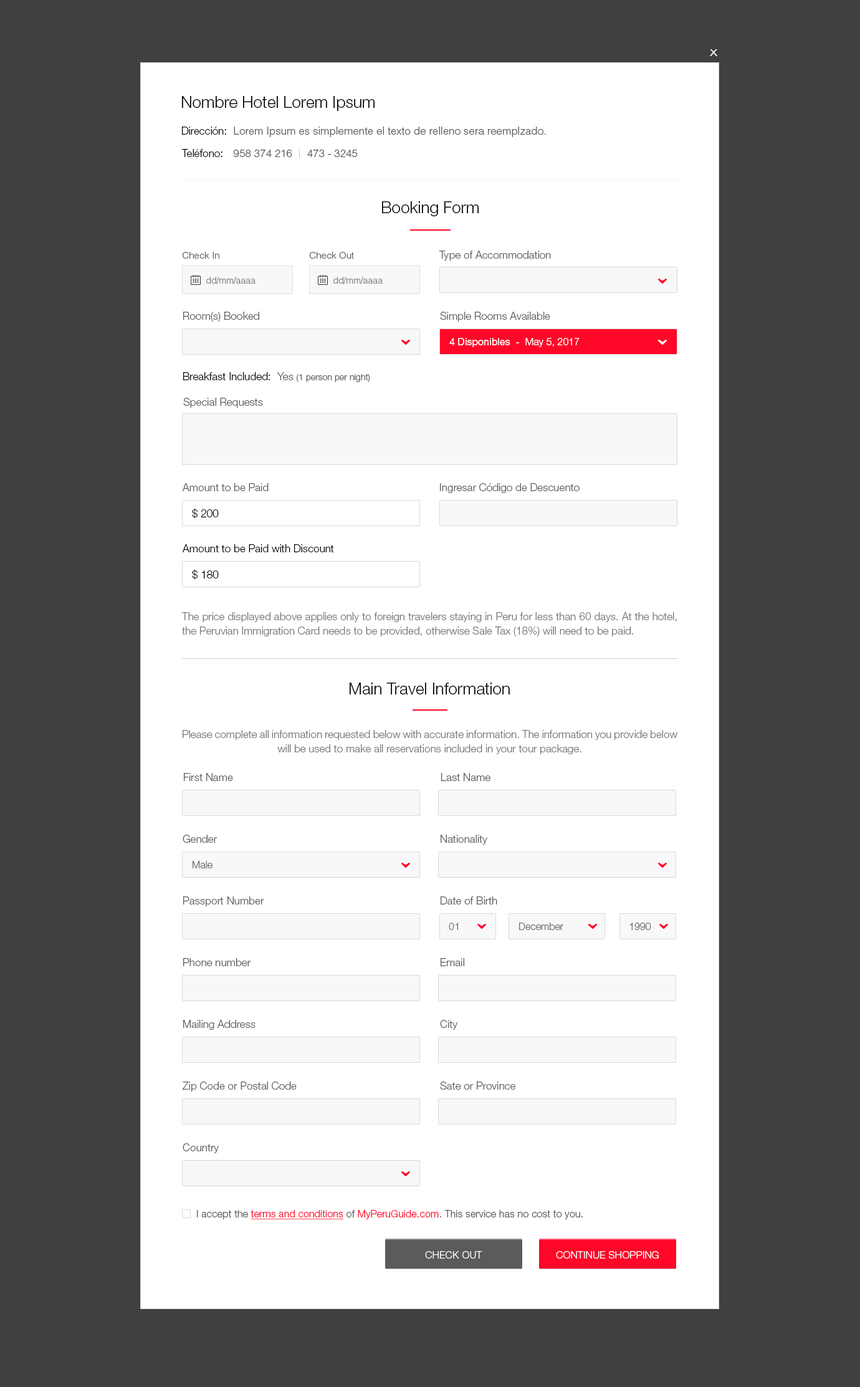
<style>
.page{position:relative;width:860px;height:1387px;background:#ffffff}
.page>*{position:absolute;margin:0}
.t1{font:13.1px "HelveticaNeueLTStd-Lt";color:#ffffff;scale:1.18 1}
.t2{font:16.2px "HelveticaNeueLTStd-Lt";color:#000000}
.t3{font:10.6px "HelveticaNeueLTStd-Lt";color:#000000}
.t4{font:10.6px "HelveticaLTStd-Light";color:#5b5b5b}
.t5{font:9.3px "HelveticaLTStd-Light";color:#5b5b5b}
.t6{font:10.6px "HelveticaNeueLTStd-Lt";color:#5b5b5b}
.t7{font:8.7px "HelveticaLTStd-Light";color:#7f7f7f}
.t8{font:10px "HelveticaNeueLTStd-Roman";color:#ffffff}
.t9{font:10px "HelveticaNeueLTStd-Lt";color:#ffffff}
.t10{font:8.7px "HelveticaNeueLTStd-Lt";color:#5b5b5b}
.t11{font:10.6px/14.3px "HelveticaNeueLTStd-Lt";color:#767676}
.t12{font:10px "HelveticaNeueLTStd-Lt";color:#5b5b5b}
.t13{font:10px "HelveticaNeueLTStd-Lt";letter-spacing:0.01em;color:#5b5b5b}
.t14{font:10px "HelveticaNeueLTStd-Lt";letter-spacing:0.01em;color:#ff0729;text-decoration:underline}
.t15{font:10px "HelveticaNeueLTStd-Lt";letter-spacing:0.01em;color:#ff0729}
.t16{font:10px "HelveticaNeueLTStd-Lt";letter-spacing:0.01em;color:#ffffff;text-transform:uppercase}
</style>
<div class="page">
<p class="t1" style="left:710px;top:49px;width:8px;height:7px">x</p>
<p class="t2" style="left:182px;top:96px;width:193px;height:15px">Nombre Hotel Lorem Ipsum</p>
<p class="t3" style="left:182px;top:127px;width:44px;height:8px">Dirección:</p>
<p class="t4" style="left:234px;top:127px;width:312px;height:10px">Lorem Ipsum es simplemente el texto de relleno sera reemplzado.</p>
<p class="t3" style="left:181px;top:149px;width:41px;height:8px">Teléfono:</p>
<p class="t4" style="left:234px;top:150px;width:124px;height:7px">958 374 216     473 - 3245</p>
<p class="t2" style="left:382px;top:201px;width:97px;height:15px">Booking Form</p>
<p class="t5" style="left:183px;top:252px;width:36px;height:7px">Check In</p>
<p class="t5" style="left:310px;top:252px;width:44px;height:7px">Check Out</p>
<p class="t6" style="left:439px;top:251px;width:112px;height:9px">Type of Accommodation</p>
<p class="t7" style="left:206px;top:277px;width:50px;height:7px">dd/mm/aaaa</p>
<p class="t7" style="left:333px;top:277px;width:50px;height:7px">dd/mm/aaaa</p>
<p class="t6" style="left:183px;top:312px;width:76px;height:10px">Room(s) Booked</p>
<p class="t6" style="left:440px;top:312px;width:110px;height:10px">Simple Rooms Available</p>
<p class="t8" style="left:449px;top:338px;width:131px;height:9px">4 Disponibles  -  <span class="t9">May 5, 2017</span></p>
<p class="t3" style="left:183px;top:372px;width:87px;height:8px">Breakfast Included:</p>
<p class="t10" style="left:277px;top:372px;width:93px;height:10px"><span class="t6">Yes </span>(1 person per night)</p>
<p class="t6" style="left:183px;top:398px;width:80px;height:10px">Special Requests</p>
<p class="t6" style="left:182px;top:483px;width:87px;height:8px">Amount to be Paid</p>
<p class="t6" style="left:440px;top:483px;width:140px;height:10px">Ingresar Código de Descuento</p>
<p class="t3" style="left:192px;top:508px;width:27px;height:10px">$ 200</p>
<p class="t3" style="left:182px;top:544px;width:152px;height:8px">Amount to be Paid with Discount</p>
<p class="t3" style="left:192px;top:569px;width:27px;height:11px">$ 180</p>
<p class="t11" style="left:181px;top:612px;width:496px;height:24px;text-align:justify">The price displayed above applies only to foreign travelers staying in Peru for less than 60 days. At the hotel, the Peruvian Immigration Card needs to be provided, otherwise Sale Tax (18%) will need to be paid.</p>
<p class="t2" style="left:350px;top:682px;width:160px;height:12px">Main Travel Information</p>
<p class="t11" style="left:183px;top:730px;width:494px;height:24px;text-align:justify">Please complete all information requested below with accurate information. The information you provide below will be used to make all reservations included in your tour package.</p>
<p class="t6" style="left:184px;top:773px;width:49px;height:8px">First Name</p>
<p class="t6" style="left:441px;top:773px;width:49px;height:8px">Last Name</p>
<p class="t6" style="left:183px;top:834px;width:34px;height:9px">Gender</p>
<p class="t6" style="left:441px;top:834px;width:46px;height:10px">Nationality</p>
<p class="t12" style="left:193px;top:861px;width:20px;height:7px;opacity:0.9">Male</p>
<p class="t6" style="left:183px;top:896px;width:81px;height:10px">Passport Number</p>
<p class="t6" style="left:441px;top:896px;width:56px;height:8px">Date of Birth</p>
<p class="t12" style="left:449px;top:922px;width:9px;height:8px;opacity:0.9">01</p>
<p class="t12" style="left:519px;top:922px;width:45px;height:8px;opacity:0.9">December</p>
<p class="t12" style="left:629px;top:922px;width:22px;height:8px;opacity:0.9">1990</p>
<p class="t6" style="left:183px;top:958px;width:68px;height:8px">Phone number</p>
<p class="t6" style="left:441px;top:958px;width:23px;height:8px">Email</p>
<p class="t6" style="left:183px;top:1020px;width:73px;height:9px">Mailing Address</p>
<p class="t6" style="left:440px;top:1020px;width:17px;height:9px">City</p>
<p class="t6" style="left:183px;top:1081px;width:114px;height:10px">Zip Code or Postal Code</p>
<p class="t6" style="left:440px;top:1081px;width:75px;height:8px">Sate or Province</p>
<p class="t6" style="left:183px;top:1143px;width:36px;height:10px">Country</p>
<p class="t13" style="left:197px;top:1210px;width:386px;height:9px">I accept the <span class="t14">terms and conditions</span> of <span class="t15">MyPeruGuide.com</span>. This service has no cost to you.</p>
<p class="t16" style="left:425px;top:1251px;width:57px;height:7px">Check Out</p>
<p class="t16" style="left:556px;top:1251px;width:103px;height:7px">Continue Shopping</p>
</div>
